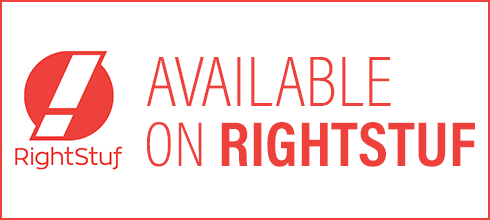
<style>
.page{position:relative;width:490px;height:220px;background:#ffffff}
.page>*{position:absolute;margin:0}
.t1{font:72px "AcuminConcept-CondensedExtraLight";color:#ee413c}
.t2{font:64px "AcuminConcept-CondensedBold";color:#ee413c}
.t3{font:64px "AcuminConcept-CondensedExtraLight";color:#ee413c}
</style>
<div class="page">
<p class="t1" style="left:147px;top:57px;width:244px;height:49px">AVAILABLE</p>
<p class="t2" style="left:146px;top:121px;width:329px;height:46px"><span class="t3">ON </span>RIGHTSTUF</p>
</div>
